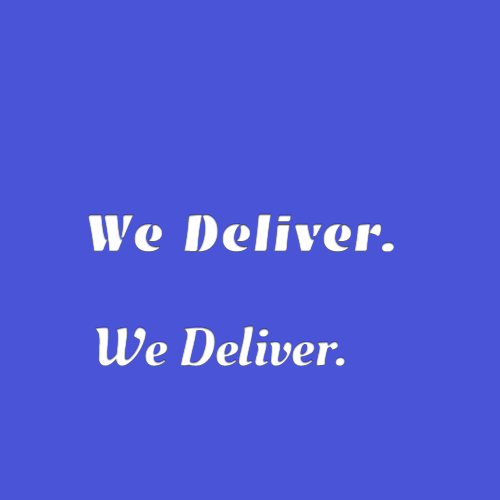
<style>
.page{position:relative;width:500px;height:500px;background:#4955d6}
.page>*{position:absolute;margin:0}
.t1{font:53.8px "EmblemaOne-Regular";color:#ffffff;font-weight:bold;scale:0.85 1}
.t2{font:54px "OleoScript-Regular";color:#ffffff;scale:1.08 1}
</style>
<div class="page">
<p class="t1" style="left:88px;top:213px;width:306px;height:39px">We Deliver.</p>
<p class="t2" style="left:95px;top:325px;width:250px;height:41px">We Deliver.</p>
</div>
